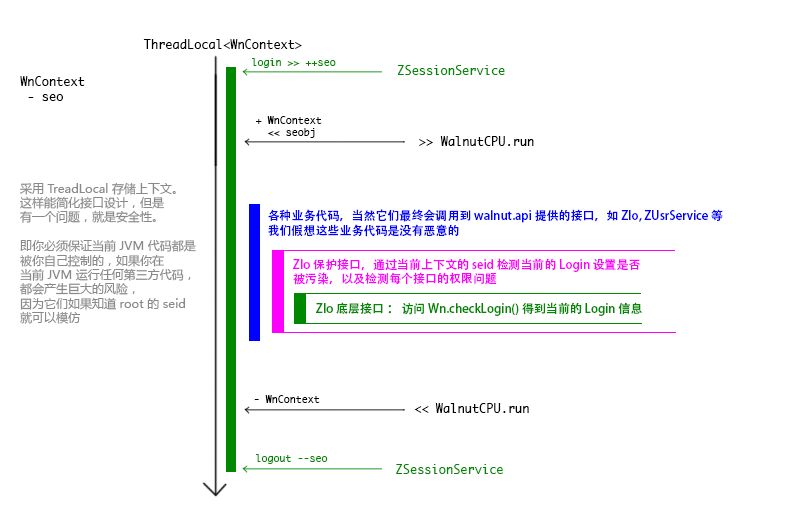
<style>
.page{position:relative;width:800px;height:526px;background:#ffffff}
.page>*{position:absolute;margin:0}
.t1{font:12px "Monaco";color:#000000}
.t2{font:10px "Monaco";color:#008800}
.t3{font:12px "Monaco";color:#008800}
.t4{font:10px "Monaco";color:#000000}
.t5{font:12px "MicrosoftYaHei";color:#898989}
.t6{font:12px "AdobeHeitiStd-Regular";color:#0000ff}
.t7{font:12px "AdobeHeitiStd-Regular";color:#ff00ff}
.t8{font:12px "AdobeHeitiStd-Regular";color:#008800}
</style>
<div class="page">
<p class="t1" style="left:143px;top:39px;width:159px;height:10px">ThreadLocal&lt;WnContext&gt;</p>
<p class="t2" style="left:252px;top:58px;width:84px;height:10px">login &gt;&gt; ++seo</p>
<p class="t3" style="left:397px;top:65px;width:108px;height:10px">ZSessionService</p>
<p class="t1" style="left:20px;top:76px;width:65px;height:25px">WnContext<br> - seo</p>
<p class="t4" style="left:256px;top:116px;width:66px;height:22px">+ WnContext<br>  &lt;&lt; seobj</p>
<p class="t1" style="left:419px;top:136px;width:115px;height:10px">&gt;&gt; WalnutCPU.run</p>
<p class="t5" style="left:19px;top:182px;width:177px;height:142px">采用 TreadLocal 存储上下文。<br>这样能简化接口设计，但是<br>有一个问题，就是安全性。<br><br>即你必须保证当前 JVM 代码都是<br>被你自己控制的，如果你在<br>当前 JVM 运行任何第三方代码，<br>都会产生巨大的风险，<br>因为它们如果知道 root 的 seid<br>就可以模仿</p>
<p class="t6" style="left:268px;top:209px;width:455px;height:28px">各种业务代码，当然它们最终会调用到 walnut.api 提供的接口，如 ZIo, ZUsrService 等<br>我们假想这些业务代码是没有恶意的</p>
<p class="t7" style="left:293px;top:258px;width:347px;height:27px">ZIo 保护接口，通过当前上下文的 seid 检测当前的 Login 设置是否<br>被污染，以及检测每个接口的权限问题</p>
<p class="t8" style="left:316px;top:302px;width:326px;height:14px">ZIo 底层接口 ： 访问 Wn.checkLogin() 得到当前的 Login 信息</p>
<p class="t4" style="left:254px;top:395px;width:66px;height:8px">- WnContext</p>
<p class="t1" style="left:414px;top:403px;width:115px;height:10px">&lt;&lt; WalnutCPU.run</p>
<p class="t2" style="left:256px;top:454px;width:72px;height:10px">logout --seo</p>
<p class="t3" style="left:396px;top:464px;width:107px;height:10px">ZSessionService</p>
</div>
